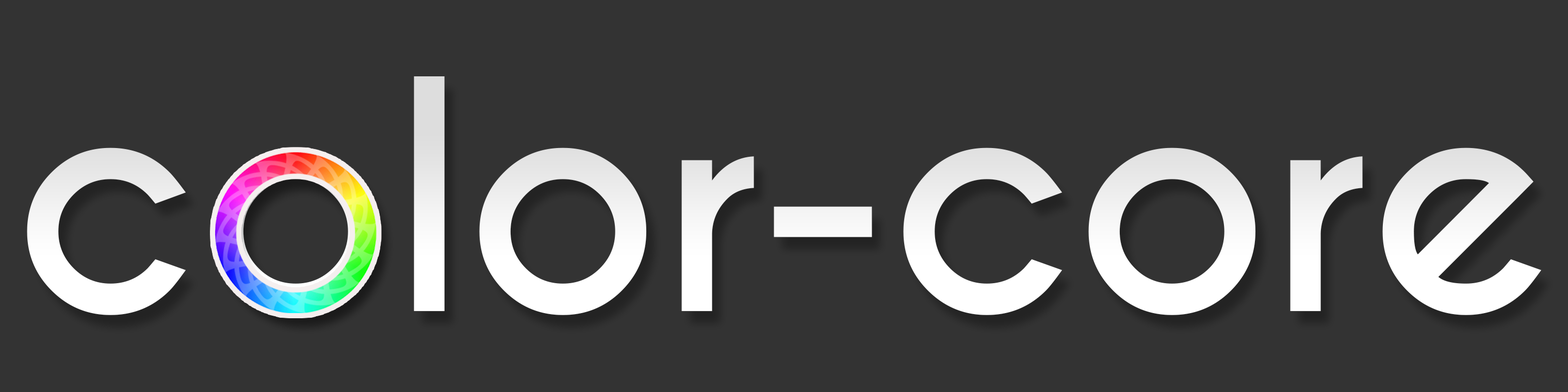
<style>
.page{position:relative;width:1568px;height:392px;background:#333333}
.page>*{position:absolute;margin:0}
.t1{font:300px "CaviarDreams-Bold";color:#ffffff}
</style>
<div class="page">
<p class="t1" style="left:27px;top:76px;width:1515px;height:239px">color-core</p>
</div>
